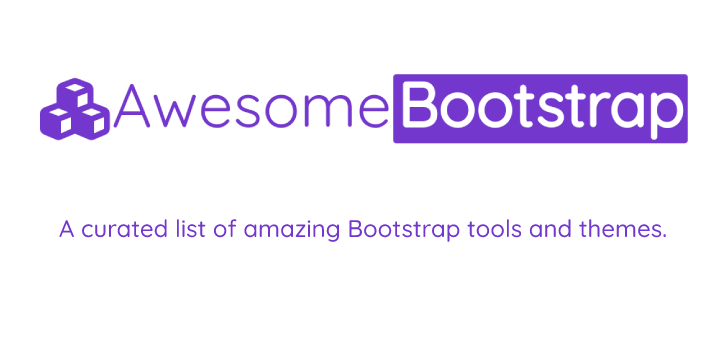
<style>
.page{position:relative;width:728px;height:364px;background:#ffffff}
.page>*{position:absolute;margin:0}
.t1{font:24px "Quicksand-Medium";color:#7337cd}
</style>
<div class="page">
<p class="t1" style="left:59px;top:219px;width:607px;height:23px">A curated list of amazing Bootstrap tools and themes.</p>
</div>
